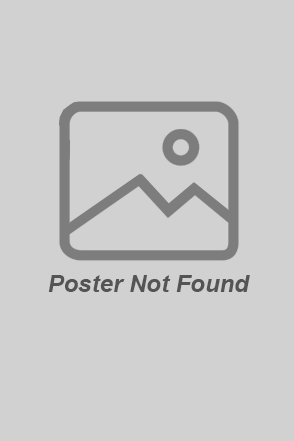
<style>
.page{position:relative;width:294px;height:441px;background:#d1d1d1}
.page>*{position:absolute;margin:0}
.t1{font:24px "Arial-BoldItalicMT";color:#545454}
</style>
<div class="page">
<p class="t1" style="left:48px;top:275px;width:202px;height:17px">Poster Not Found</p>
</div>
